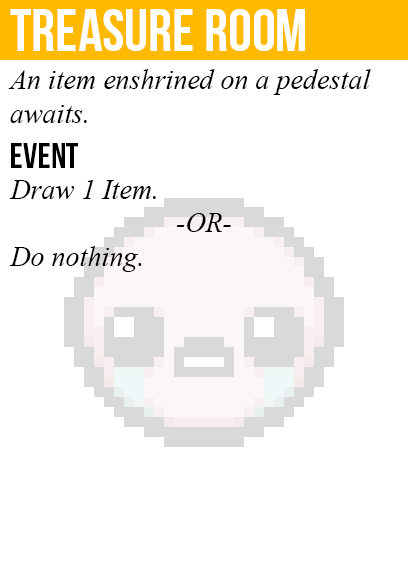
<style>
.page{position:relative;width:408px;height:585px;background:#ffffff}
.page>*{position:absolute;margin:0}
.t1{font:60px "BebasNeue";color:#ffffff}
.t2{font:28px "TimesNewRomanPS-ItalicMT";color:#000000}
.t3{font:36px "BebasNeue";color:#000000}
</style>
<div class="page">
<p class="t1" style="left:10px;top:9px;width:295px;height:42px">treasure room</p>
<p class="t2" style="left:8px;top:69px;width:363px;height:54px">An item enshrined on a pedestal<br>awaits.</p>
<p class="t3" style="left:11px;top:143px;width:67px;height:25px">event</p>
<p class="t2" style="left:9px;top:180px;width:147px;height:92px">Draw 1 Item.<br><br>Do nothing.</p>
<p class="t2" style="left:176px;top:213px;width:55px;height:19px">-OR-</p>
</div>
